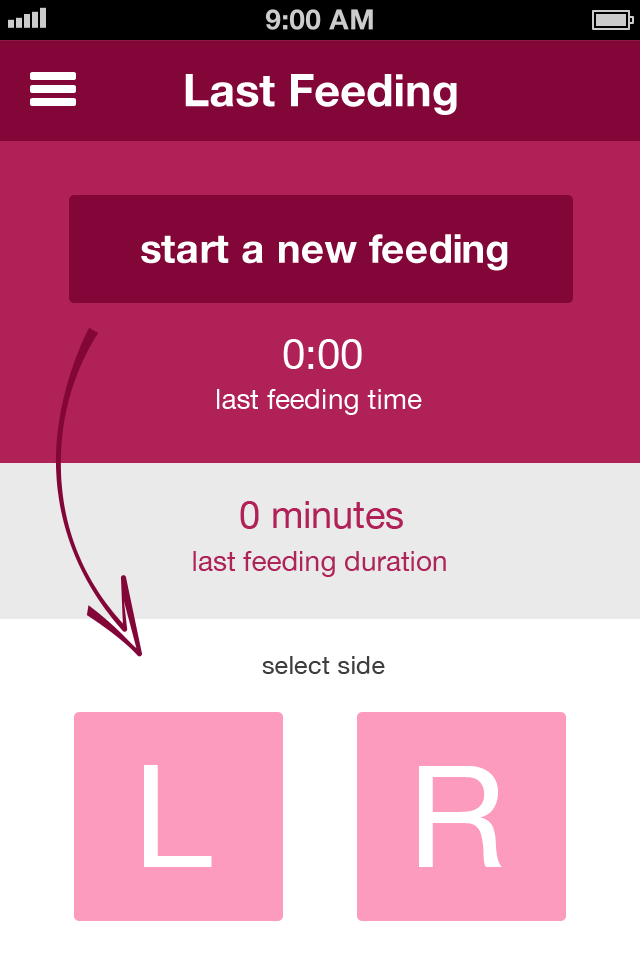
<style>
.page{position:relative;width:640px;height:960px;background:#b02157}
.page>*{position:absolute;margin:0}
.t1{font:45px "HelveticaNeue-Bold";color:#ffffff}
.t2{font:40px "HelveticaNeue-Bold";color:#ffffff}
.t3{font:42px "HelveticaNeue";color:#ffffff}
.t4{font:28px "HelveticaNeue";color:#ffffff}
.t5{font:38px "HelveticaNeue";color:#b02157}
.t6{font:28px "HelveticaNeue";color:#ae2458}
.t7{font:25px "HelveticaNeue";color:#3e3e3e}
.t8{font:142.4px "HelveticaNeue";color:#ffffff}
</style>
<div class="page">
<p class="t1" style="left:185px;top:74px;width:272px;height:41px">Last Feeding</p>
<p class="t2" style="left:141px;top:234px;width:367px;height:37px">start a new feeding</p>
<p class="t3" style="left:283px;top:339px;width:79px;height:30px">0:00</p>
<p class="t4" style="left:217px;top:389px;width:205px;height:26px">last feeding time</p>
<p class="t5" style="left:240px;top:501px;width:163px;height:28px">0 minutes</p>
<p class="t6" style="left:193px;top:551px;width:253px;height:26px">last feeding duration</p>
<p class="t7" style="left:262px;top:656px;width:123px;height:18px">select side</p>
<p class="t8" style="left:144px;top:765px;width:68px;height:102px">L</p>
<p class="t8" style="left:419px;top:766px;width:83px;height:101px">R</p>
</div>
